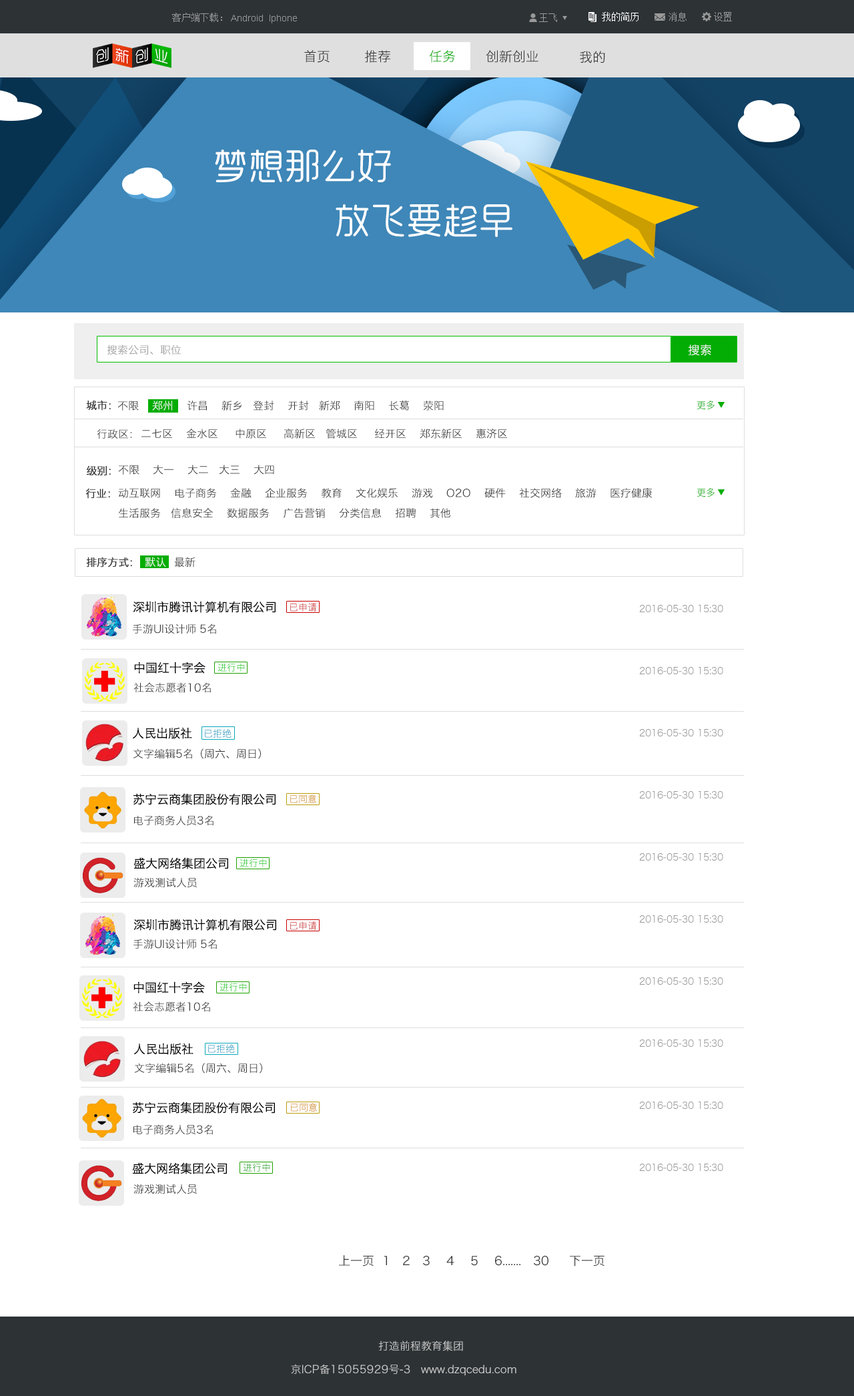
<style>
.page{position:relative;width:854px;height:1396px;background:#ffffff}
.page>*{position:absolute;margin:0}
.t1{font:9.3px "SimSun";color:#999999}
.t2{font:9.3px "ArialMT";color:#999999}
.t3{font:9.3px "SimSun";color:#ffffff}
.t4{font:13.3px "HiraginoSansGB-W3";color:#333333}
.t5{font:13.3px "HiraginoSansGB-W3";color:#04ad03}
.t6{font:36px "RTWSYueRoudGoDemo-Regular";color:#ffffff}
.t7{font:10.7px "HiraginoSansGB-W3";color:#999999}
.t8{font:12px "HiraginoSansGB-W3";color:#ffffff}
.t9{font:10.7px "HiraginoSansGB-W3";color:#333333;font-weight:bold}
.t10{font:10.7px "HiraginoSansGB-W3";color:#333333}
.t11{font:10.7px "HiraginoSansGB-W3";color:#ffffff}
.t12{font:9.3px "HiraginoSansGB-W3";color:#04ad03}
.t13{font:10.7px/20px "HiraginoSansGB-W3";color:#333333}
.t14{font:12px "HiraginoSansGB-W3";color:#000000}
.t15{font:9.3px "HiraginoSansGB-W3"}
.t16{font:9.3px "HiraginoSansGB-W3";color:#999999}
.t17{font:12px "HiraginoSansGB-W3";color:#333333}
.t18{font:10.7px "HiraginoSansGB-W3";color:#cccccc}
</style>
<div class="page">
<p class="t1" style="left:172px;top:13px;width:50px;height:9px">客户端下载：</p>
<p class="t2" style="left:231px;top:15px;width:66px;height:8px">Android  Iphone</p>
<p class="t1" style="left:539px;top:13px;width:18px;height:9px">王飞</p>
<p class="t3" style="left:602px;top:12px;width:37px;height:9px">我的简历</p>
<p class="t1" style="left:669px;top:12px;width:18px;height:9px">消息</p>
<p class="t1" style="left:714px;top:12px;width:18px;height:9px">设置</p>
<p class="t4" style="left:304px;top:50px;width:26px;height:13px">首页</p>
<p class="t4" style="left:365px;top:50px;width:25px;height:13px">推荐</p>
<p class="t5" style="left:429px;top:50px;width:26px;height:13px">任务</p>
<p class="t4" style="left:486px;top:50px;width:53px;height:13px">创新创业</p>
<p class="t4" style="left:580px;top:51px;width:25px;height:12px">我的</p>
<p class="t6" style="left:215px;top:150px;width:176px;height:32px">梦想那么好</p>
<p class="t6" style="left:336px;top:204px;width:177px;height:33px">放飞要趁早</p>
<p class="t7" style="left:107px;top:344px;width:75px;height:11px">搜索公司、职位</p>
<p class="t8" style="left:688px;top:344px;width:24px;height:12px">搜索</p>
<p class="t9" style="left:86px;top:400px;width:25px;height:10px">城市：</p>
<p class="t10" style="left:117px;top:400px;width:327px;height:10px">不限 <span class="t11">   郑州</span>    许昌    新乡   登封    开封   新郑    南阳    长葛    荥阳</p>
<p class="t12" style="left:697px;top:400px;width:18px;height:10px">更多</p>
<p class="t10" style="left:97px;top:429px;width:35px;height:10px">行政区：</p>
<p class="t10" style="left:142px;top:429px;width:365px;height:10px">二七区    金水区     中原区     高新区   管城区     经开区    郑东新区    惠济区</p>
<p class="t9" style="left:86px;top:465px;width:25px;height:11px">级别：</p>
<p class="t10" style="left:118px;top:465px;width:156px;height:10px">不限    大一    大二   大三    大四</p>
<p class="t9" style="left:85px;top:488px;width:25px;height:11px">行业：</p>
<p class="t13" style="left:118px;top:487px;width:535px;height:31px">动互联网    电子商务    金融    企业服务    教育    文化娱乐    游戏    O2O    硬件    社交网络    旅游    医疗健康    <br>生活服务   信息安全    数据服务    广告营销    分类信息    招聘    其他</p>
<p class="t12" style="left:697px;top:488px;width:18px;height:9px">更多</p>
<p class="t9" style="left:86px;top:557px;width:46px;height:10px">排序方式：</p>
<p class="t11" style="left:145px;top:557px;width:21px;height:10px">默认</p>
<p class="t10" style="left:174px;top:557px;width:22px;height:10px">最新</p>
<p class="t14" style="left:133px;top:601px;width:143px;height:12px">深圳市腾讯计算机有限公司</p>
<p class="t15" style="left:290px;top:603px;width:27px;height:8px">已申请</p>
<p class="t16" style="left:639px;top:605px;width:85px;height:7px">2016-05-30 15:30</p>
<p class="t10" style="left:133px;top:623px;width:83px;height:11px">手游UI设计师 5名</p>
<p class="t14" style="left:134px;top:661px;width:72px;height:12px">中国红十字会</p>
<p class="t15" style="left:218px;top:663px;width:27px;height:8px">进行中</p>
<p class="t16" style="left:639px;top:667px;width:85px;height:7px">2016-05-30 15:30</p>
<p class="t10" style="left:133px;top:682px;width:78px;height:11px">社会志愿者10名</p>
<p class="t14" style="left:132px;top:727px;width:60px;height:12px">人民出版社</p>
<p class="t15" style="left:204px;top:729px;width:28px;height:9px">已拒绝</p>
<p class="t16" style="left:639px;top:729px;width:85px;height:7px">2016-05-30 15:30</p>
<p class="t10" style="left:133px;top:748px;width:128px;height:11px">文字编辑5名（周六、周日）</p>
<p class="t14" style="left:133px;top:793px;width:143px;height:12px">苏宁云商集团股份有限公司</p>
<p class="t15" style="left:290px;top:794px;width:27px;height:9px">已同意</p>
<p class="t16" style="left:639px;top:791px;width:85px;height:7px">2016-05-30 15:30</p>
<p class="t10" style="left:134px;top:815px;width:80px;height:11px">电子商务人员3名</p>
<p class="t14" style="left:133px;top:857px;width:95px;height:12px">盛大网络集团公司</p>
<p class="t16" style="left:639px;top:853px;width:85px;height:7px">2016-05-30 15:30</p>
<p class="t15" style="left:240px;top:858px;width:27px;height:9px">进行中</p>
<p class="t10" style="left:133px;top:877px;width:64px;height:11px">游戏测试人员</p>
<p class="t16" style="left:639px;top:915px;width:85px;height:7px">2016-05-30 15:30</p>
<p class="t14" style="left:133px;top:918px;width:143px;height:12px">深圳市腾讯计算机有限公司</p>
<p class="t15" style="left:290px;top:921px;width:27px;height:9px">已申请</p>
<p class="t10" style="left:133px;top:938px;width:84px;height:11px">手游UI设计师 5名</p>
<p class="t16" style="left:639px;top:977px;width:85px;height:8px">2016-05-30 15:30</p>
<p class="t14" style="left:133px;top:981px;width:72px;height:12px">中国红十字会</p>
<p class="t15" style="left:220px;top:983px;width:27px;height:8px">进行中</p>
<p class="t10" style="left:133px;top:1001px;width:77px;height:11px">社会志愿者10名</p>
<p class="t14" style="left:133px;top:1043px;width:61px;height:12px">人民出版社</p>
<p class="t15" style="left:208px;top:1044px;width:27px;height:9px">已拒绝</p>
<p class="t16" style="left:639px;top:1039px;width:85px;height:8px">2016-05-30 15:30</p>
<p class="t10" style="left:134px;top:1063px;width:128px;height:10px">文字编辑5名（周六、周日）</p>
<p class="t14" style="left:133px;top:1101px;width:142px;height:12px">苏宁云商集团股份有限公司</p>
<p class="t15" style="left:290px;top:1103px;width:28px;height:8px">已同意</p>
<p class="t16" style="left:639px;top:1101px;width:85px;height:8px">2016-05-30 15:30</p>
<p class="t10" style="left:133px;top:1124px;width:80px;height:11px">电子商务人员3名</p>
<p class="t14" style="left:132px;top:1162px;width:95px;height:12px">盛大网络集团公司</p>
<p class="t15" style="left:243px;top:1163px;width:27px;height:8px">进行中</p>
<p class="t16" style="left:639px;top:1163px;width:85px;height:8px">2016-05-30 15:30</p>
<p class="t10" style="left:133px;top:1183px;width:64px;height:11px">游戏测试人员</p>
<p class="t17" style="left:339px;top:1255px;width:266px;height:11px">上一页  1   2   3    4    5    6.......   30     下一页</p>
<p class="t18" style="left:378px;top:1340px;width:85px;height:11px">打造前程教育集团</p>
<p class="t18" style="left:291px;top:1364px;width:226px;height:12px">京ICP备15055929号-3   www.dzqcedu.com</p>
</div>
